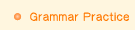
<style>
.page{position:relative;width:135px;height:30px;background:#fff6df}
.page>*{position:absolute;margin:0}
.t1{font:11px "DFYuan-Md-HKP-BF";letter-spacing:0.05em;color:#ff7800}
</style>
<div class="page">
<p class="t1" style="left:30px;top:12px;width:99px;height:9px">Grammar Practice</p>
</div>
